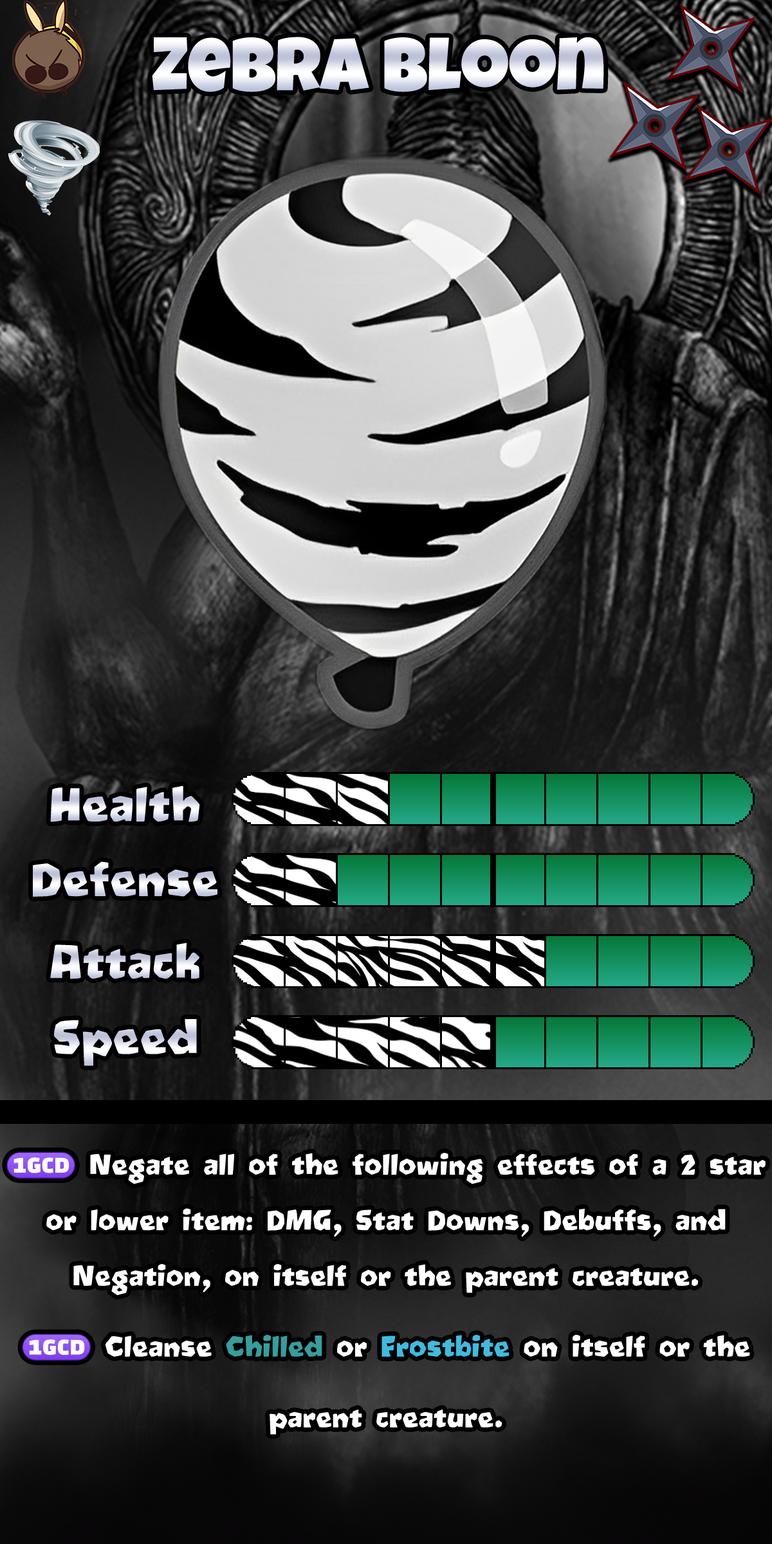
<style>
.page{position:relative;width:772px;height:1544px}
.page>*{position:absolute;margin:0}
.t1{font:128.7px "LuckiestGuy-Regular"}
.t2{font:77.2px "Oetztype"}
.t3{font:46.3px "Oetztype";letter-spacing:-0.005em;color:#ffffff}
.t4{font:27px/70.8px "stoogedings-Regular";color:#ffffff}
.t5{font:46.3px/70.8px "stoogedings-Regular";color:#ffffff}
.t6{font:46.3px/70.8px "Oetztype";letter-spacing:-0.005em;color:#ffffff}
.t7{font:46.3px/70.8px "Oetztype";letter-spacing:-0.005em;color:#359e9d}
.t8{font:46.3px/70.8px "Oetztype";letter-spacing:-0.005em;color:#3fbbdf}
</style>
<div class="page">
<p class="t1" style="left:152px;top:37px;width:452px;height:55px">Zebra Bloon</p>
<p class="t2" style="left:50px;top:786px;width:150px;height:36px">Health</p>
<p class="t2" style="left:33px;top:862px;width:184px;height:35px">Defense</p>
<p class="t2" style="left:50px;top:943px;width:149px;height:36px">Attack</p>
<p class="t2" style="left:54px;top:1019px;width:143px;height:47px">Speed</p>
<p class="t3" style="left:6px;top:1152px;width:760px;height:283px;text-align:center"><span class="t4">(1GCD) </span>Negate all of the following effects of a 2 star or lower item: DMG, Stat Downs, Debuffs, and Negation, on itself or the parent creature. <br><span class="t5">(1GCD)</span><span class="t6"> Cleanse </span><span class="t7">Chilled </span><span class="t6">or </span><span class="t8">Frostbite</span><span class="t6"> on itself or the parent creature.</span></p>
</div>
